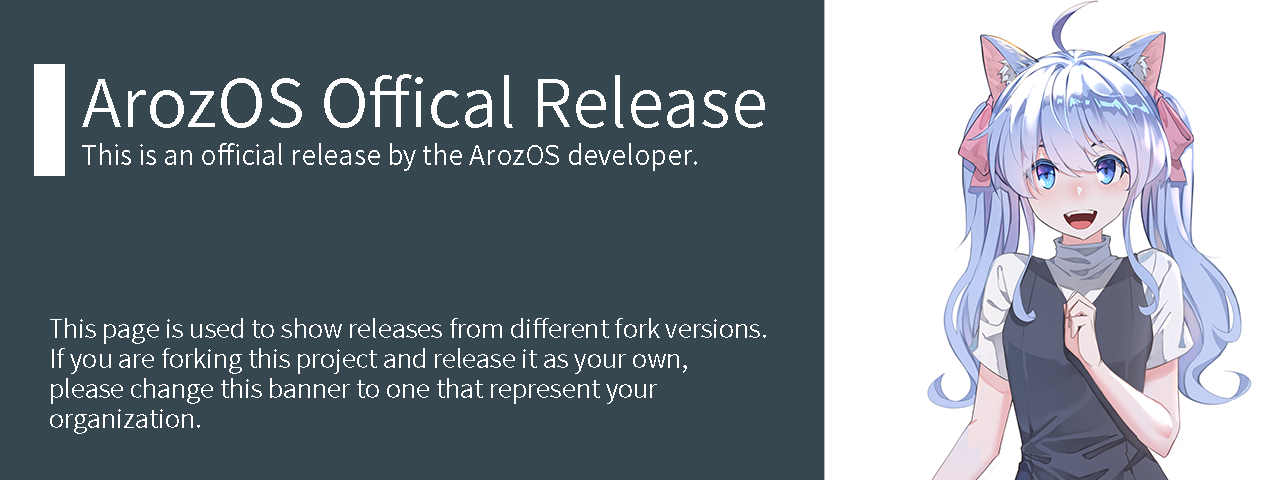
<style>
.page{position:relative;width:1280px;height:480px;background:#37474f}
.page>*{position:absolute;margin:0}
.t1{font:66px "NotoSansCJKtc-DemiLight";color:#ffffff}
.t2{font:27px "NotoSansCJKtc-DemiLight";color:#ffffff}
.t3{font:25px/30px "NotoSansCJKtc-DemiLight";color:#ffffff}
</style>
<div class="page">
<p class="t1" style="left:82px;top:74px;width:683px;height:54px">ArozOS Offical Release</p>
<p class="t2" style="left:82px;top:143px;width:615px;height:28px">This is an official release by the ArozOS developer.</p>
<p class="t3" style="left:50px;top:318px;width:716px;height:116px">This page is used to show releases from different fork versions. <br>If you are forking this project and release it as your own, <br>please change this banner to one that represent your <br>organization.</p>
</div>
